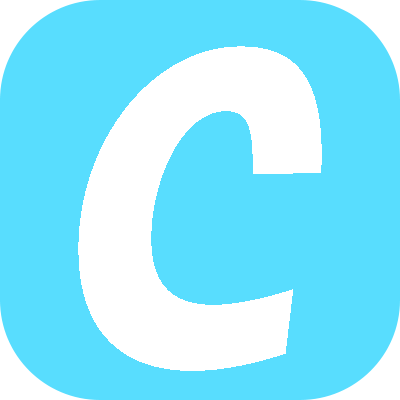
<style>
.page{position:relative;width:400px;height:400px;background:#58ddfe}
.page>*{position:absolute;margin:0}
.t1{font:500px "OperatorMono-BoldItalic";color:#ffffff}
</style>
<div class="page">
<p class="t1" style="left:78px;top:46px;width:244px;height:325px">C</p>
</div>
